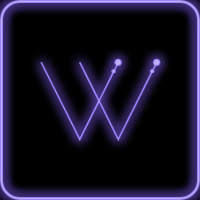
<style>
.page{position:relative;width:200px;height:200px;background:#000000}
.page>*{position:absolute;margin:0}
.t1{font:110px "CanisMinor-Regular";color:#957bf4}
</style>
<div class="page">
<p class="t1" style="left:40px;top:58px;width:121px;height:83px">W</p>
</div>
